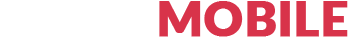
<style>
.page{position:relative;width:350px;height:40px;background:#ffffff}
.page>*{position:absolute;margin:0}
.t1{font:48px "Lato-Black";color:#d8334a;font-weight:bold}
.t2{font:48px "Lato-Black";color:#ffffff;font-weight:bold}
</style>
<div class="page">
<p class="t1" style="left:1px;top:1px;width:347px;height:36px"><span class="t2">ULTRA</span>MOBILE</p>
</div>
